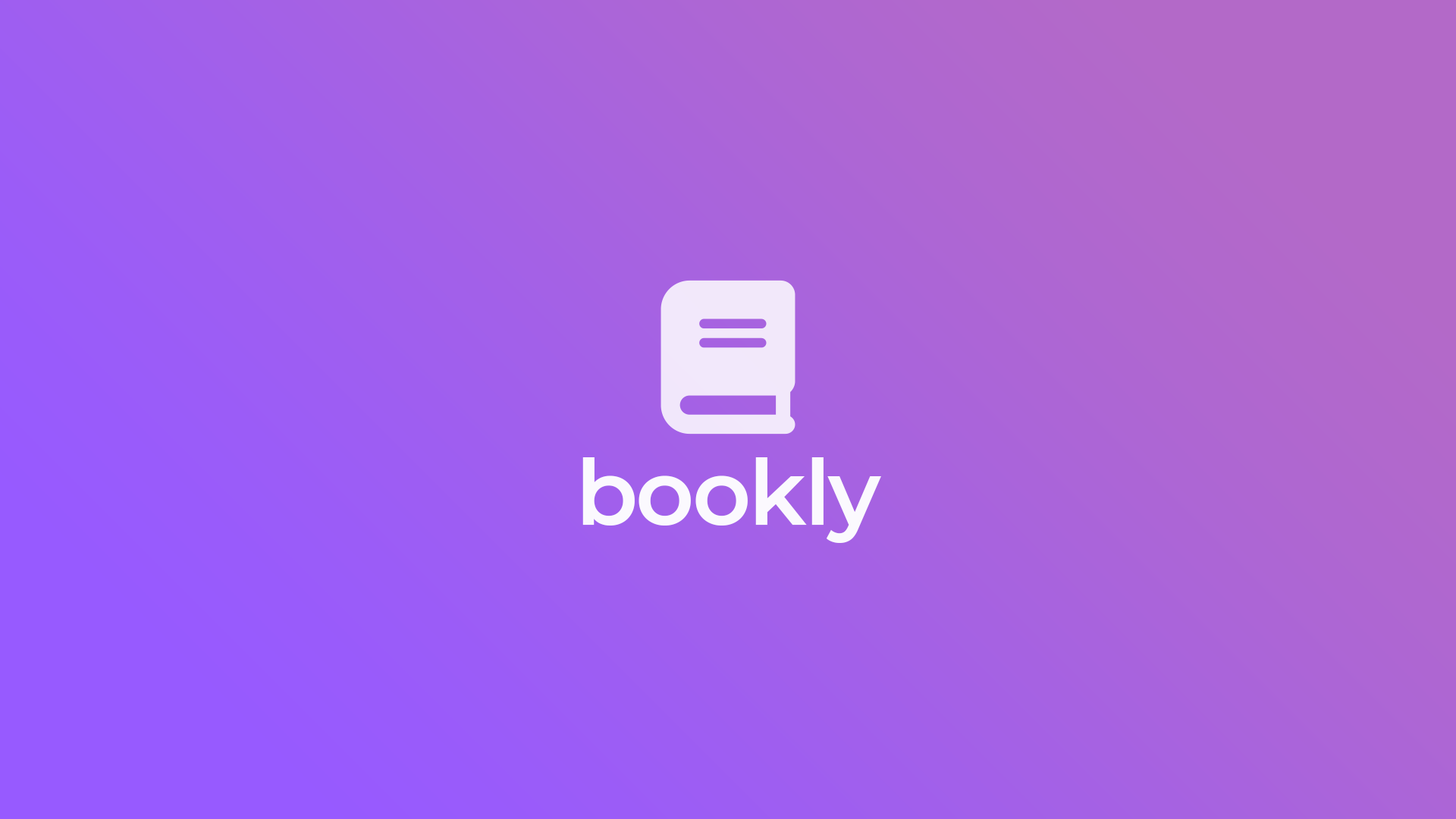
<style>
.page{position:relative;width:1456px;height:819px}
.page>*{position:absolute;margin:0}
.t1{font:91px "Montserrat-SemiBold";letter-spacing:-0.025em;color:#ffffff}
</style>
<div class="page">
<p class="t1" style="left:582px;top:457px;width:299px;height:86px;opacity:0.95">bookly</p>
</div>
